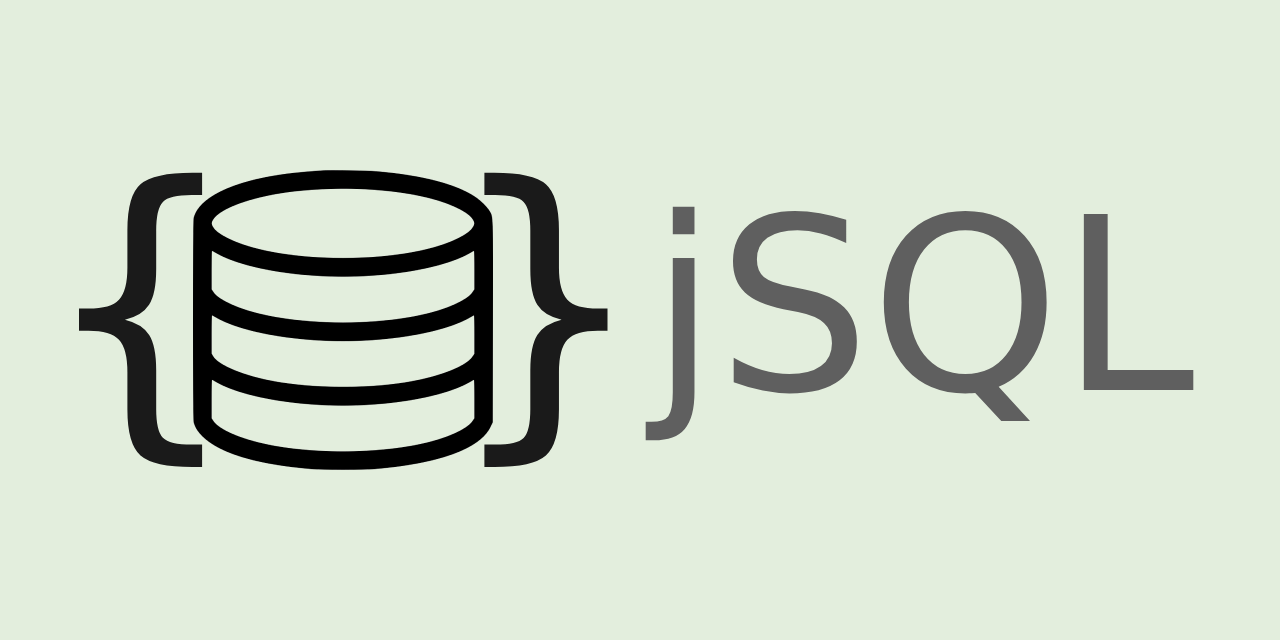
<style>
.page{position:relative;width:1280px;height:640px;background:#e3eedd}
.page>*{position:absolute;margin:0}
.t1{font:241.3px "DejaVuSans";color:#5f5f5f}
</style>
<div class="page">
<p class="t1" style="left:645px;top:206px;width:549px;height:235px">jSQL</p>
</div>
